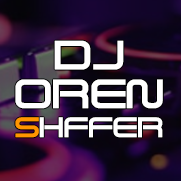
<style>
.page{position:relative;width:181px;height:181px}
.page>*{position:absolute;margin:0}
.t1{font:49.4px/38.7px "SavedByZero";letter-spacing:-0.01em;color:#ffffff}
.t2{font:33.7px/28.9px "SavedByZero";letter-spacing:-0.01em;color:#ff9600}
.t3{font:33.7px/28.9px "SavedByZero";letter-spacing:-0.01em;color:#ffffff}
</style>
<div class="page">
<p class="t1" style="left:15px;top:40px;width:148px;height:98px;text-align:center">DJ<br>OREN<br><span class="t2">S</span><span class="t3">HFFER</span></p>
</div>
